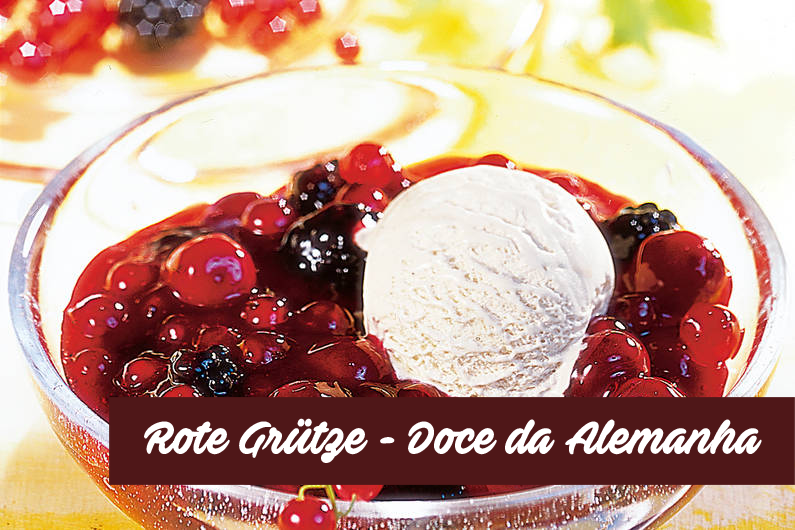
<style>
.page{position:relative;width:795px;height:530px}
.page>*{position:absolute;margin:0}
.t1{font:45.9px "AveFedanPERSONALUSEONLY";color:#ffffff;scale:0.93 1}
</style>
<div class="page">
<p class="t1" style="left:144px;top:418px;width:618px;height:45px">Rote Grütze - Doce da Alemanha</p>
</div>
